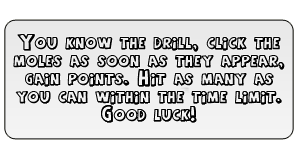
<style>
.page{position:relative;width:300px;height:150px;background:#ffffff}
.page>*{position:absolute;margin:0}
.t1{font:15px "AgentOrange";color:#000000;font-variant:small-caps;font-weight:bold}
</style>
<div class="page">
<p class="t1" style="left:13px;top:34px;width:272px;height:89px;text-align:center">You know the drill, click the moles as soon as they appear, gain points. Hit as many as you can within the time limit. Good luck!</p>
</div>
